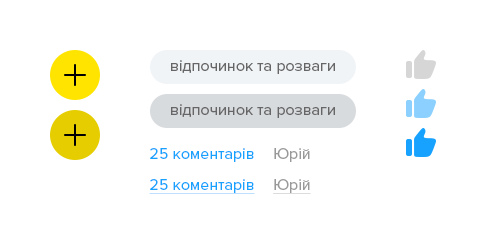
<style>
.page{position:relative;width:486px;height:244px;background:#ffffff}
.page>*{position:absolute;margin:0}
.t1{font:16px "ProximaNova-Regular";color:#666666}
.t2{font:16px "ProximaNova-Regular";color:#17a2ff}
.t3{font:16px "ProximaNova-Regular";color:#999999}
.t4{font:16px "ProximaNova-Regular";color:#17a2ff;text-decoration:underline}
.t5{font:16px "ProximaNova-Regular";color:#999999;text-decoration:underline}
</style>
<div class="page">
<p class="t1" style="left:171px;top:60px;width:164px;height:14px">відпочинок та розваги</p>
<p class="t1" style="left:171px;top:104px;width:164px;height:14px">відпочинок та розваги</p>
<p class="t2" style="left:150px;top:148px;width:104px;height:14px">25 коментарів</p>
<p class="t3" style="left:274px;top:148px;width:36px;height:14px">Юрій</p>
<p class="t4" style="left:149px;top:179px;width:106px;height:15px">25 коментарів</p>
<p class="t5" style="left:273px;top:179px;width:38px;height:15px">Юрій</p>
</div>
